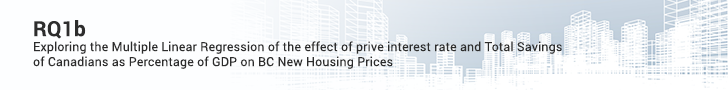
<style>
.page{position:relative;width:728px;height:90px;background:#fdfeff}
.page>*{position:absolute;margin:0}
.t1{font:12.5px "Roboto-Regular";letter-spacing:0.01em;color:#2d2d2d}
.t2{font:20.8px "Roboto-Bold";letter-spacing:0.01em;color:#2d2d2d}
</style>
<div class="page">
<p class="t1" style="left:33px;top:20px;width:529px;height:49px"><span class="t2">RQ1b<br></span>Exploring the Multiple Linear Regression of the effect of prive interest rate and Total Savings<br>of Canadians as Percentage of GDP on BC New Housing Prices</p>
</div>
